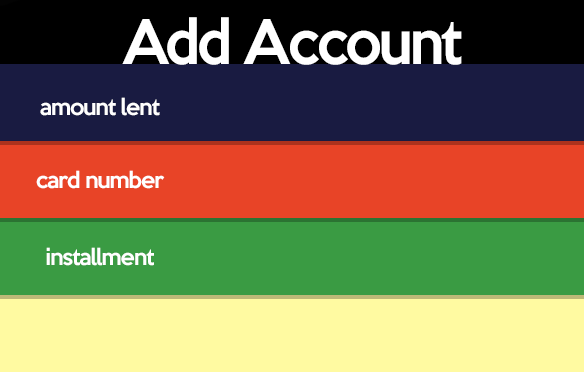
<style>
.page{position:relative;width:584px;height:372px;background:#fffaa1}
.page>*{position:absolute;margin:0}
.t1{font:56.2px "KeepCalm-Medium";letter-spacing:-0.05em;color:#ffffff;scale:0.95 1}
.t2{font:20.8px "KeepCalm-Medium";letter-spacing:-0.05em;color:#ffffff}
</style>
<div class="page">
<p class="t1" style="left:122px;top:17px;width:340px;height:48px">Add Account</p>
<p class="t2" style="left:40px;top:97px;width:120px;height:19px">amount lent</p>
<p class="t2" style="left:36px;top:170px;width:129px;height:19px">card number</p>
<p class="t2" style="left:46px;top:247px;width:108px;height:19px">installment</p>
</div>
